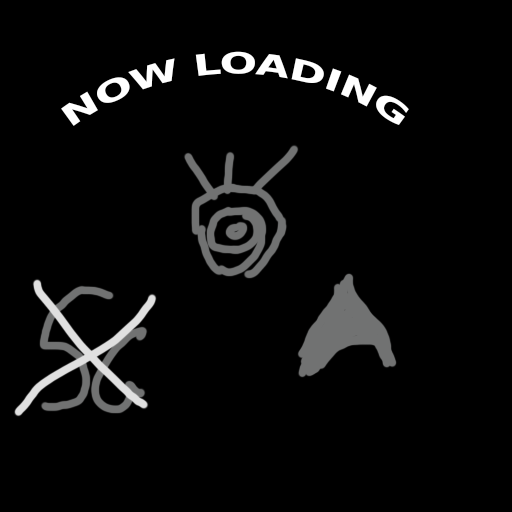
<style>
.page{position:relative;width:512px;height:512px;background:#000000}
.page>*{position:absolute;margin:0}
.t1{font:50px "DejaVuSansCondensed-Bold";color:#ffffff;text-transform:uppercase}
</style>
<div class="page">
<p class="t1" style="left:61px;top:51px;width:348px;height:75px">NOW LOADING</p>
</div>
